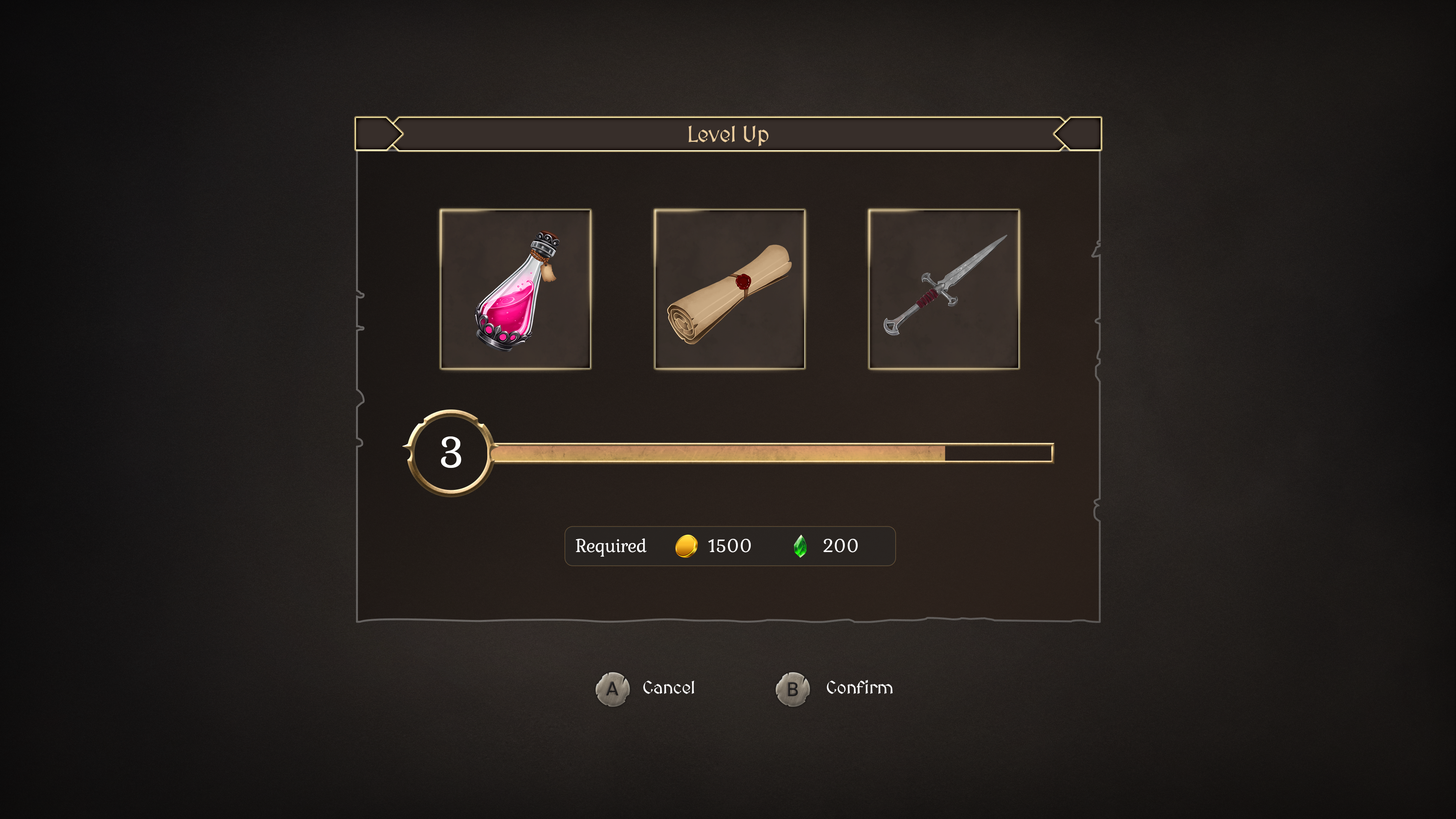
<style>
.page{position:relative;width:1456px;height:819px}
.page>*{position:absolute;margin:0}
.t1{font:22.7px "MedievalSharp";letter-spacing:-0.02em;color:#ebcd9e}
.t2{font:45.8px "Kurale-Regular";letter-spacing:-0.02em;color:#ffffff}
.t3{font:19.2px "Kurale-Regular";letter-spacing:-0.02em;color:#ffffff}
.t4{font:18.2px "MedievalSharp";letter-spacing:-0.02em;color:#ffffff}
</style>
<div class="page">
<p class="t1" style="left:689px;top:126px;width:80px;height:20px">Level Up</p>
<p class="t2" style="left:441px;top:436px;width:20px;height:32px">3</p>
<p class="t3" style="left:576px;top:538px;width:70px;height:19px">Required</p>
<p class="t3" style="left:708px;top:539px;width:43px;height:13px">1500</p>
<p class="t3" style="left:823px;top:539px;width:35px;height:13px">200</p>
<p class="t4" style="left:643px;top:681px;width:51px;height:13px">Cancel</p>
<p class="t4" style="left:827px;top:680px;width:66px;height:14px">Confirm</p>
</div>
